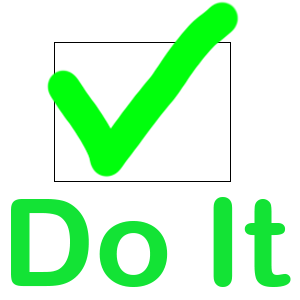
<style>
.page{position:relative;width:300px;height:300px;background:#ffffff}
.page>*{position:absolute;margin:0}
.t1{font:122.2px "ArialRoundedMTBold";color:#13e335;scale:1.04 1}
</style>
<div class="page">
<p class="t1" style="left:11px;top:197px;width:280px;height:90px">Do It</p>
</div>
